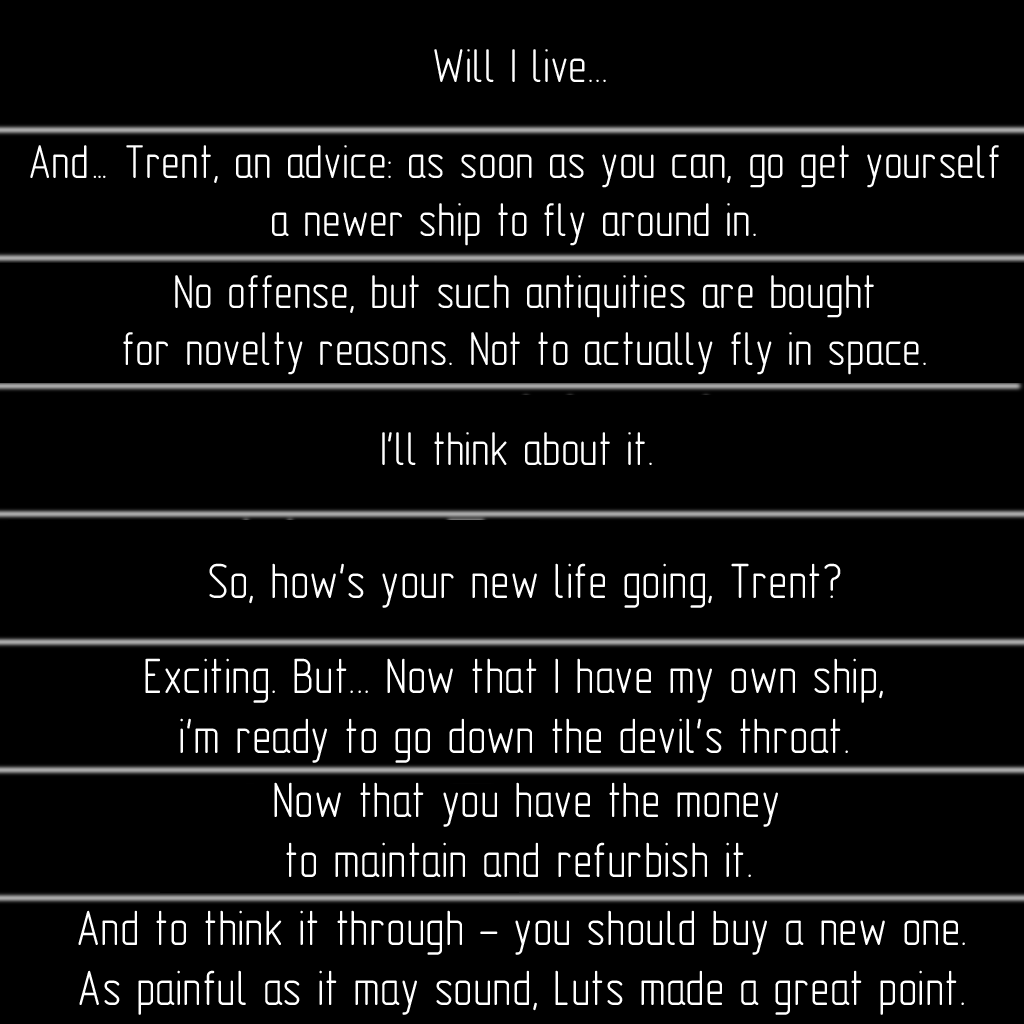
<style>
.page{position:relative;width:1024px;height:1024px;background:#000000}
.page>*{position:absolute;margin:0}
.t1{font:48px "GOST-2.304-81typeA";color:#ffffff}
.t2{font:50px "GOST-2.304-81typeA";color:#ffffff}
</style>
<div class="page">
<p class="t1" style="left:434px;top:49px;width:172px;height:33px">Will I live...</p>
<p class="t1" style="left:30px;top:145px;width:969px;height:101px;text-align:center">And… Trent, an advice: as soon as you can, go get yourself<br>a newer ship to fly around in.</p>
<p class="t1" style="left:123px;top:275px;width:803px;height:100px;text-align:center">No offense, but such antiquities are bought<br>for novelty reasons. Not to actually fly in space.</p>
<p class="t1" style="left:382px;top:432px;width:270px;height:33px">I'll think about it.</p>
<p class="t2" style="left:209px;top:563px;width:632px;height:45px">So, how's your new life going, Trent?</p>
<p class="t2" style="left:145px;top:658px;width:738px;height:105px;text-align:center">Exciting. But... Now that I have my own ship,<br>i'm ready to go down the devil's throat.</p>
<p class="t2" style="left:274px;top:782px;width:504px;height:95px;text-align:center">Now that you have the money<br>to maintain and refurbish it.</p>
<p class="t2" style="left:78px;top:910px;width:887px;height:105px;text-align:center">And to think it through – you should buy a new one.<br>As painful as it may sound, Luts made a great point.</p>
</div>
